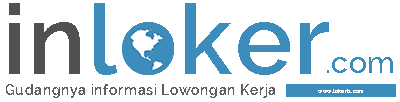
<style>
.page{position:relative;width:400px;height:102px;background:#ffffff}
.page>*{position:absolute;margin:0}
.t1{font:96.6px "Raleway-SemiBold";letter-spacing:0.025em;color:#3c8dbc}
.t2{font:96.6px "Raleway-SemiBold";letter-spacing:0.025em;color:#515151}
.t3{font:30.2px "Raleway-Medium";letter-spacing:0.025em;color:#3c8dbc}
.t4{font:14.5px "Raleway-SemiBold";letter-spacing:0.025em;color:#5e5e5e}
.t5{font:5.4px "Raleway-SemiBold";letter-spacing:0.025em;color:#ffffff}
</style>
<div class="page">
<p class="t1" style="left:9px;top:3px;width:320px;height:72px"><span class="t2">in</span>loker</p>
<p class="t3" style="left:327px;top:57px;width:66px;height:16px">.com</p>
<p class="t4" style="left:6px;top:84px;width:269px;height:14px">Gudangnya informasi Lowongan Kerja</p>
<p class="t5" style="left:318px;top:89px;width:45px;height:4px">www.lokeria.com</p>
</div>
